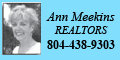
<style>
.page{position:relative;width:120px;height:60px;background:#81defc}
.page>*{position:absolute;margin:0}
.t1{font:12px "TimesNewRomanPS-BoldMT";color:#000000}
.t2{font:13px "TimesNewRomanPS-ItalicMT";color:#000000}
.t3{font:11px "TimesNewRomanPS-ItalicMT";color:#000000}
</style>
<div class="page">
<p class="t1" style="left:46px;top:12px;width:69px;height:37px;text-align:center"><span class="t2">Ann Meekins<br></span><span class="t3">REALTORS<br></span>804-438-9303</p>
</div>
